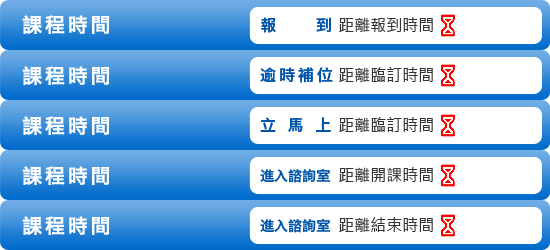
<style>
.page{position:relative;width:550px;height:250px;background:#ffffff}
.page>*{position:absolute;margin:0}
.t1{font:20px "HiraginoSansGB-W6";letter-spacing:0.14em;color:#ffffff}
.t2{font:16px "HiraginoSansGB-W6";letter-spacing:2.48em;color:#0055aa}
.t3{font:16px "MicrosoftJhengHeiRegular";color:#333333}
.t4{font:16px "HiraginoSansGB-W6";letter-spacing:0.18em;color:#0055aa}
.t5{font:16px "HiraginoSansGB-W6";letter-spacing:0.72em;color:#0055aa}
.t6{font:14px "HiraginoSansGB-W6";color:#0055aa}
</style>
<div class="page">
<p class="t1" style="left:22px;top:15px;width:88px;height:19px">課程時間</p>
<p class="t2" style="left:261px;top:17px;width:70px;height:16px">報到</p>
<p class="t3" style="left:339px;top:17px;width:94px;height:15px">距離報到時間</p>
<p class="t1" style="left:22px;top:66px;width:88px;height:19px">課程時間</p>
<p class="t4" style="left:260px;top:67px;width:73px;height:16px">逾時補位</p>
<p class="t3" style="left:339px;top:67px;width:94px;height:15px">距離臨訂時間</p>
<p class="t1" style="left:22px;top:116px;width:88px;height:19px">課程時間</p>
<p class="t5" style="left:260px;top:117px;width:71px;height:16px">立馬上</p>
<p class="t3" style="left:339px;top:117px;width:94px;height:15px">距離臨訂時間</p>
<p class="t1" style="left:22px;top:166px;width:88px;height:19px">課程時間</p>
<p class="t6" style="left:260px;top:168px;width:71px;height:15px">進入諮詢室</p>
<p class="t3" style="left:339px;top:167px;width:94px;height:15px">距離開課時間</p>
<p class="t1" style="left:22px;top:216px;width:88px;height:19px">課程時間</p>
<p class="t6" style="left:260px;top:218px;width:71px;height:15px">進入諮詢室</p>
<p class="t3" style="left:339px;top:217px;width:94px;height:15px">距離結束時間</p>
</div>
